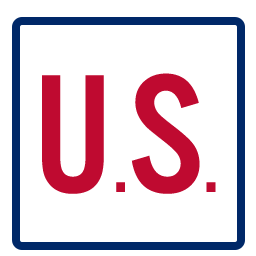
<style>
.page{position:relative;width:256px;height:256px;background:#ffffff}
.page>*{position:absolute;margin:0}
.t1{font:175px "U.S.101";letter-spacing:0.001em;color:#bf0a30}
.t2{font:90px "U.S.101";letter-spacing:0.001em;color:#bf0a30}
</style>
<div class="page">
<p class="t1" style="left:42px;top:73px;width:174px;height:121px">U<span class="t2">.</span>s<span class="t2">.</span></p>
</div>
